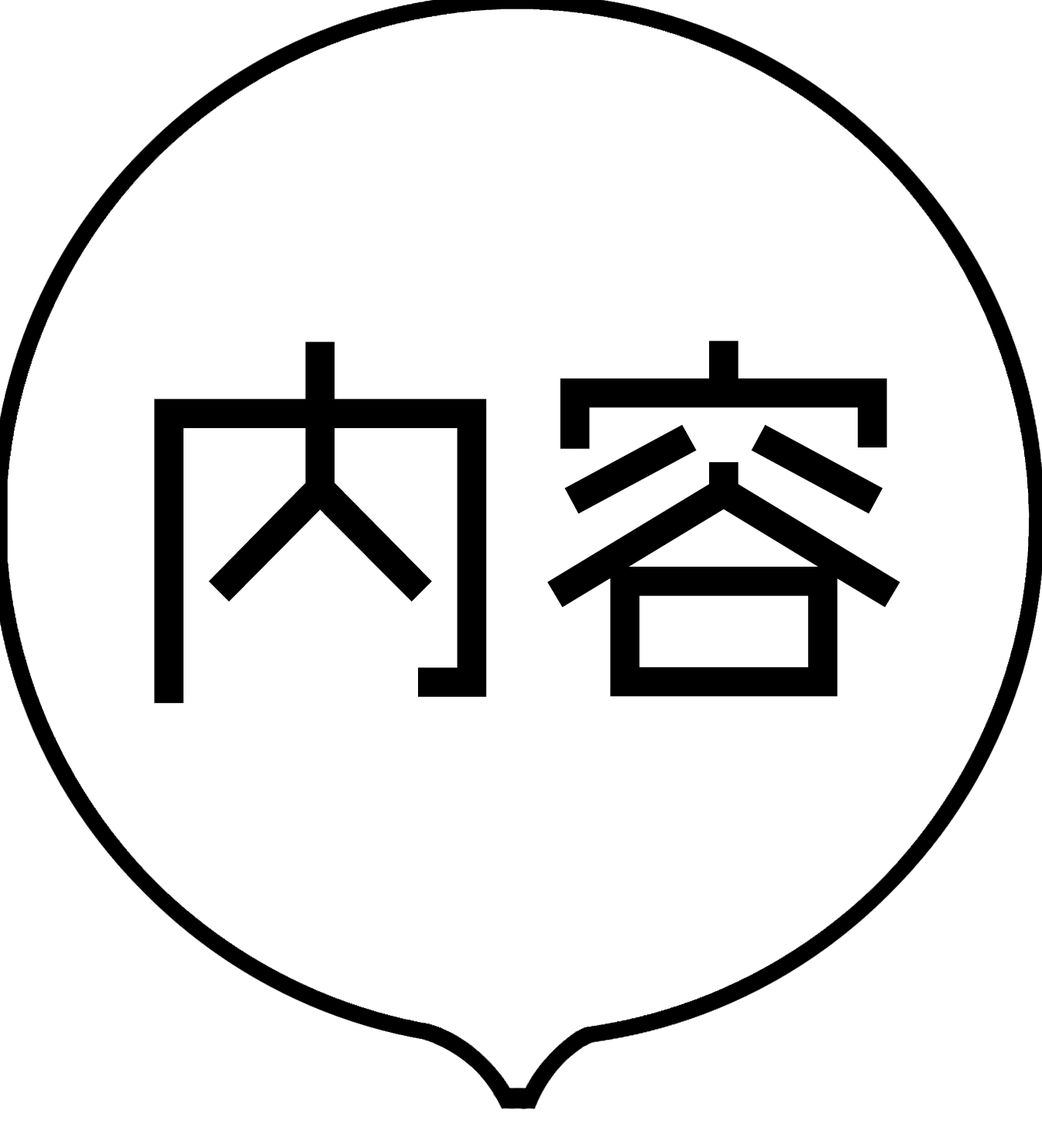
<style>
.page{position:relative;width:1042px;height:1145px;background:#ffffff}
.page>*{position:absolute;margin:0}
.t1{font:403.1px "RTWSShangGoG0v1-Regular";color:#000000}
</style>
<div class="page">
<p class="t1" style="left:154px;top:341px;width:746px;height:363px">内容</p>
</div>
